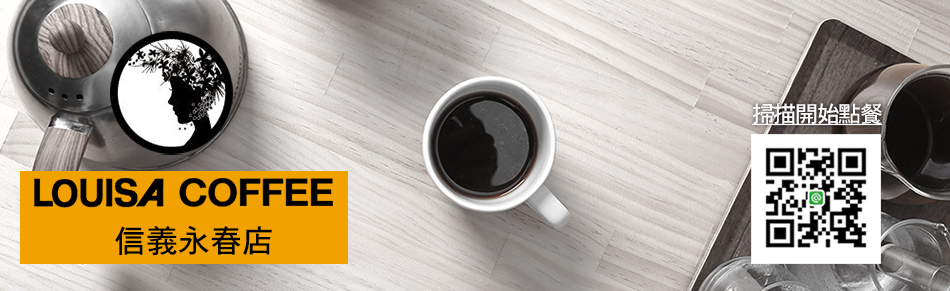
<style>
.page{position:relative;width:950px;height:291px}
.page>*{position:absolute;margin:0}
.t1{font:22.8px "DFHeiStd-W7";letter-spacing:-0.05em;color:#fdfafb;text-decoration:underline}
.t2{font:32px "DFHeiStd-W7";color:#000000}
</style>
<div class="page">
<p class="t1" style="left:752px;top:103px;width:130px;height:23px">掃描開始點餐</p>
<p class="t2" style="left:115px;top:225px;width:157px;height:31px">信義永春店</p>
</div>
